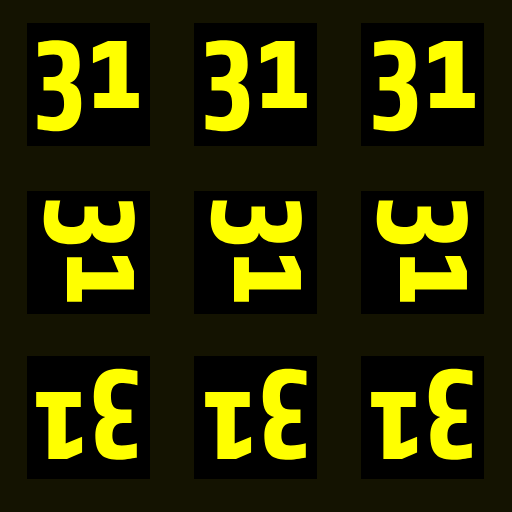
<style>
.page{position:relative;width:512px;height:512px;background:#141301}
.page>*{position:absolute;margin:0}
.t1{font:130px "Share-BoldOSF";color:#ffff00}
</style>
<div class="page">
<p class="t1" style="left:37px;top:40px;width:102px;height:92px">31</p>
<p class="t1" style="left:205px;top:40px;width:102px;height:92px">31</p>
<p class="t1" style="left:373px;top:40px;width:102px;height:92px">31</p>
<p class="t1" style="left:43px;top:200px;width:92px;height:102px;rotate:90deg">31</p>
<p class="t1" style="left:210px;top:200px;width:92px;height:102px;rotate:90deg">31</p>
<p class="t1" style="left:376px;top:200px;width:92px;height:102px;rotate:90deg">31</p>
<p class="t1" style="left:36px;top:368px;width:102px;height:92px;rotate:-180deg">31</p>
<p class="t1" style="left:205px;top:368px;width:102px;height:92px;rotate:-180deg">31</p>
<p class="t1" style="left:371px;top:368px;width:102px;height:92px;rotate:-180deg">31</p>
</div>
